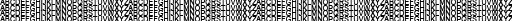
<style>
.page{position:relative;width:512px;height:21px;background:#ffffff}
.page>*{position:absolute;margin:0}
.t1{font:7.5px "ArialMT";color:#000000;scale:0.97 1}
</style>
<div class="page">
<p class="t1" style="left:0px;top:5px;width:129px;height:7px">ABCDEFGHIJKLMNOPQRSTUVWXYZ</p>
<p class="t1" style="left:0px;top:0px;width:129px;height:6px">ABCDEFGHIJKLMNOPQRSTUVWXYZ</p>
<p class="t1" style="left:128px;top:5px;width:129px;height:7px">ABCDEFGHIJKLMNOPQRSTUVWXYZ</p>
<p class="t1" style="left:128px;top:0px;width:129px;height:6px">ABCDEFGHIJKLMNOPQRSTUVWXYZ</p>
<p class="t1" style="left:256px;top:5px;width:129px;height:7px">ABCDEFGHIJKLMNOPQRSTUVWXYZ</p>
<p class="t1" style="left:256px;top:0px;width:129px;height:6px">ABCDEFGHIJKLMNOPQRSTUVWXYZ</p>
<p class="t1" style="left:384px;top:5px;width:129px;height:7px">ABCDEFGHIJKLMNOPQRSTUVWXYZ</p>
<p class="t1" style="left:384px;top:0px;width:129px;height:6px">ABCDEFGHIJKLMNOPQRSTUVWXYZ</p>
<p class="t1" style="left:0px;top:16px;width:129px;height:7px">ABCDEFGHIJKLMNOPQRSTUVWXYZ</p>
<p class="t1" style="left:0px;top:10px;width:129px;height:7px">ABCDEFGHIJKLMNOPQRSTUVWXYZ</p>
<p class="t1" style="left:128px;top:16px;width:129px;height:7px">ABCDEFGHIJKLMNOPQRSTUVWXYZ</p>
<p class="t1" style="left:128px;top:10px;width:129px;height:7px">ABCDEFGHIJKLMNOPQRSTUVWXYZ</p>
<p class="t1" style="left:256px;top:16px;width:129px;height:7px">ABCDEFGHIJKLMNOPQRSTUVWXYZ</p>
<p class="t1" style="left:256px;top:10px;width:129px;height:7px">ABCDEFGHIJKLMNOPQRSTUVWXYZ</p>
<p class="t1" style="left:384px;top:16px;width:129px;height:7px">ABCDEFGHIJKLMNOPQRSTUVWXYZ</p>
<p class="t1" style="left:384px;top:10px;width:129px;height:7px">ABCDEFGHIJKLMNOPQRSTUVWXYZ</p>
</div>
